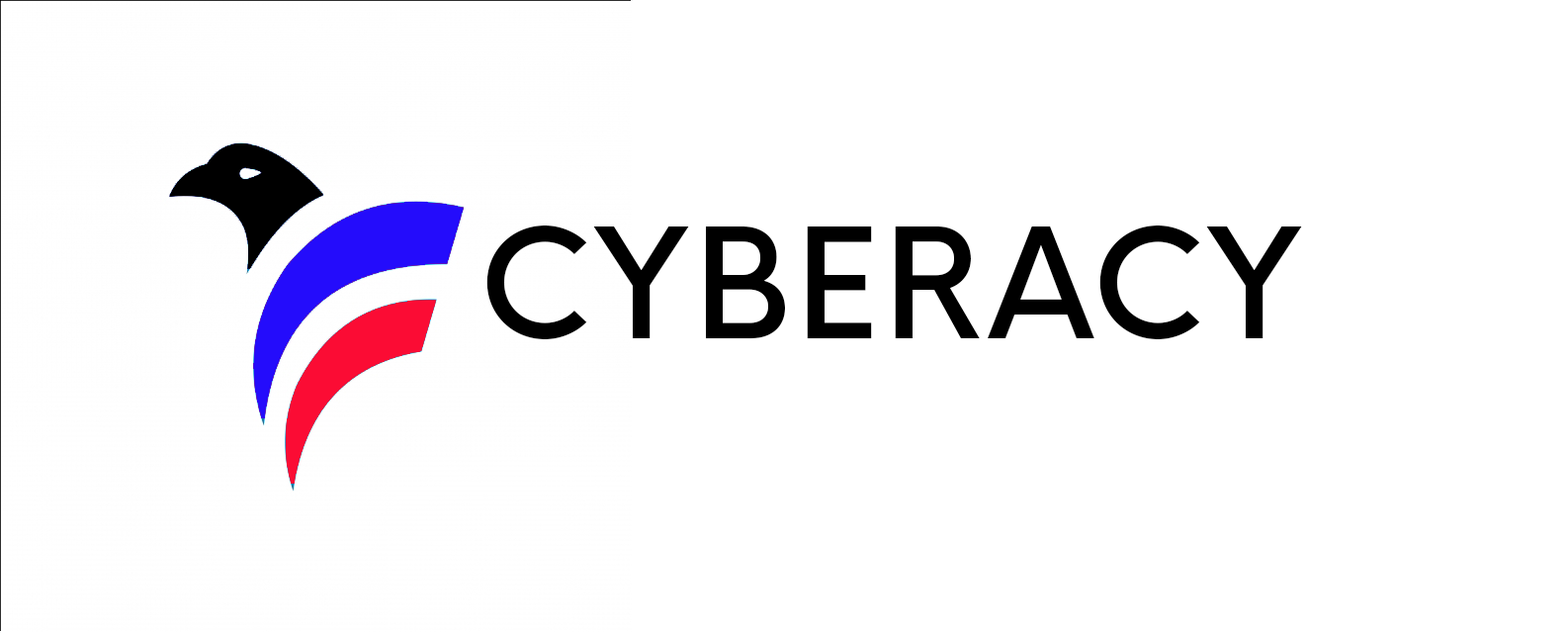
<style>
.page{position:relative;width:1568px;height:633px;background:#ffffff}
.page>*{position:absolute;margin:0}
.t1{font:148.3px "HKNova-Medium";color:#000000}
</style>
<div class="page">
<p class="t1" style="left:486px;top:225px;width:816px;height:114px">CYBERACY</p>
</div>
